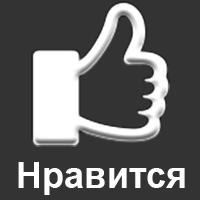
<style>
.page{position:relative;width:200px;height:200px;background:#333333}
.page>*{position:absolute;margin:0}
.t1{font:36px "Arial-BoldMT";color:#ffffff}
</style>
<div class="page">
<p class="t1" style="left:18px;top:162px;width:167px;height:33px">Нравится</p>
</div>
